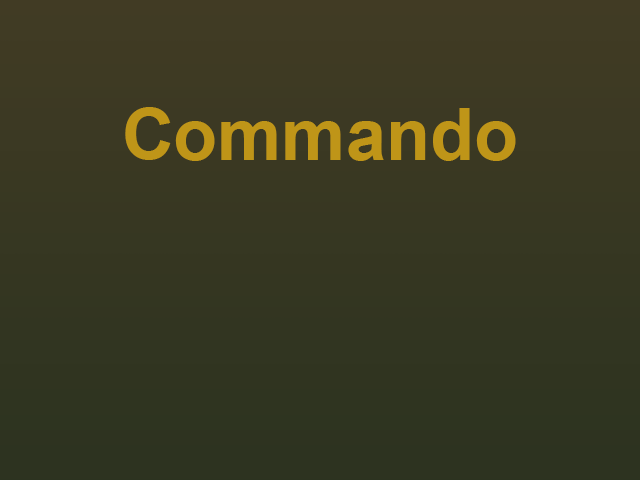
<style>
.page{position:relative;width:640px;height:480px}
.page>*{position:absolute;margin:0}
.t1{font:72px "Arial-BoldMT";color:#c09618}
</style>
<div class="page">
<p class="t1" style="left:125px;top:107px;width:391px;height:54px">Commando</p>
</div>
